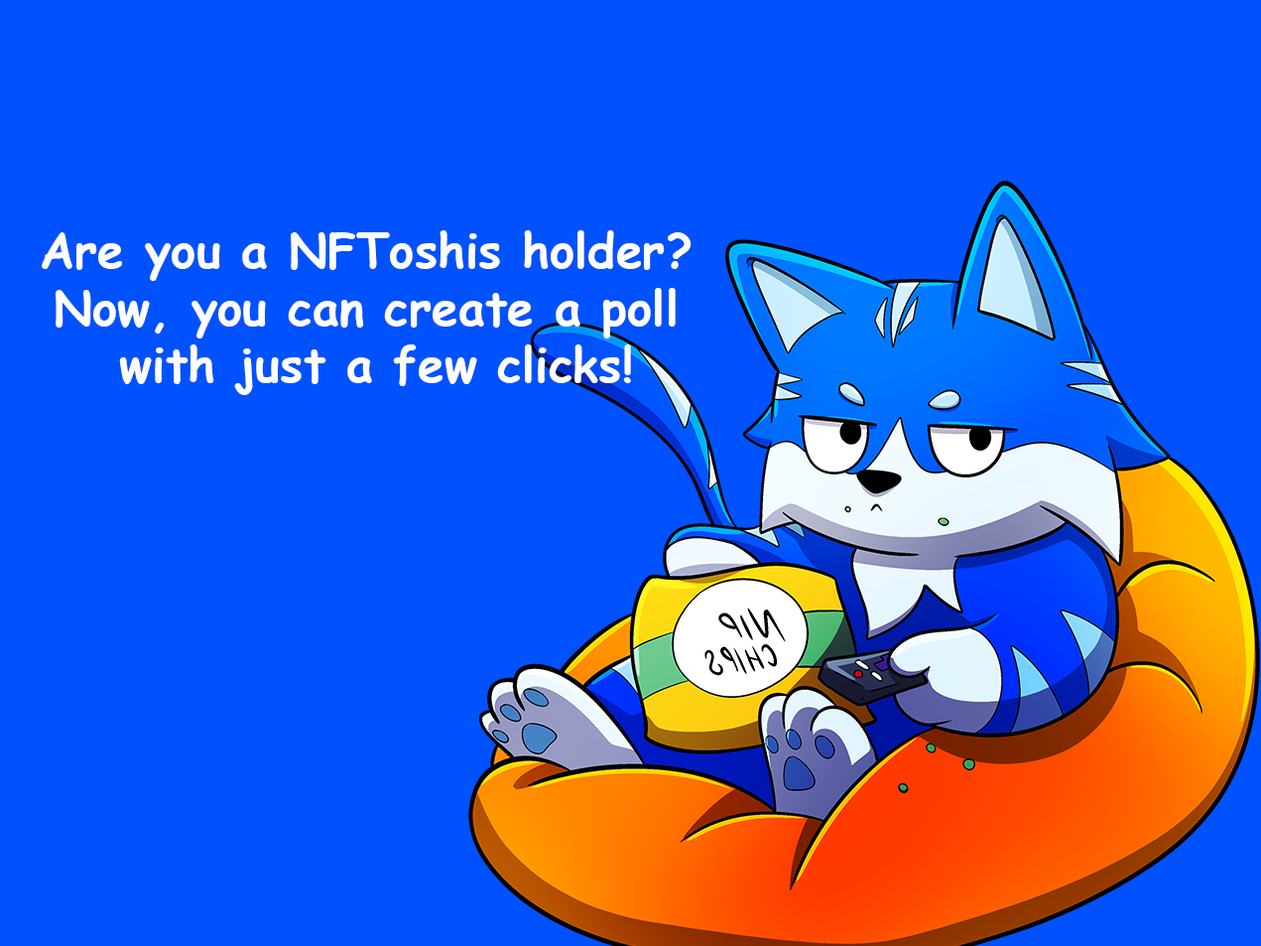
<style>
.page{position:relative;width:1261px;height:946px;background:#0052fe}
.page>*{position:absolute;margin:0}
.t1{font:47.6px "ComicSansMS-Bold";color:#fffefe}
</style>
<div class="page">
<p class="t1" style="left:42px;top:230px;width:650px;height:165px;text-align:center">Are you a NFToshis holder? <br>Now, you can create a poll <br>with just a few clicks!</p>
</div>
